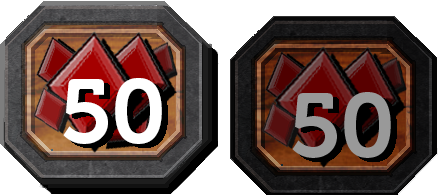
<style>
.page{position:relative;width:443px;height:195px;background:#ffffff}
.page>*{position:absolute;margin:0}
.t1{font:90px "Museo-700";color:#ffffff}
</style>
<div class="page">
<p class="t1" style="left:63px;top:78px;width:99px;height:66px">50</p>
</div>
